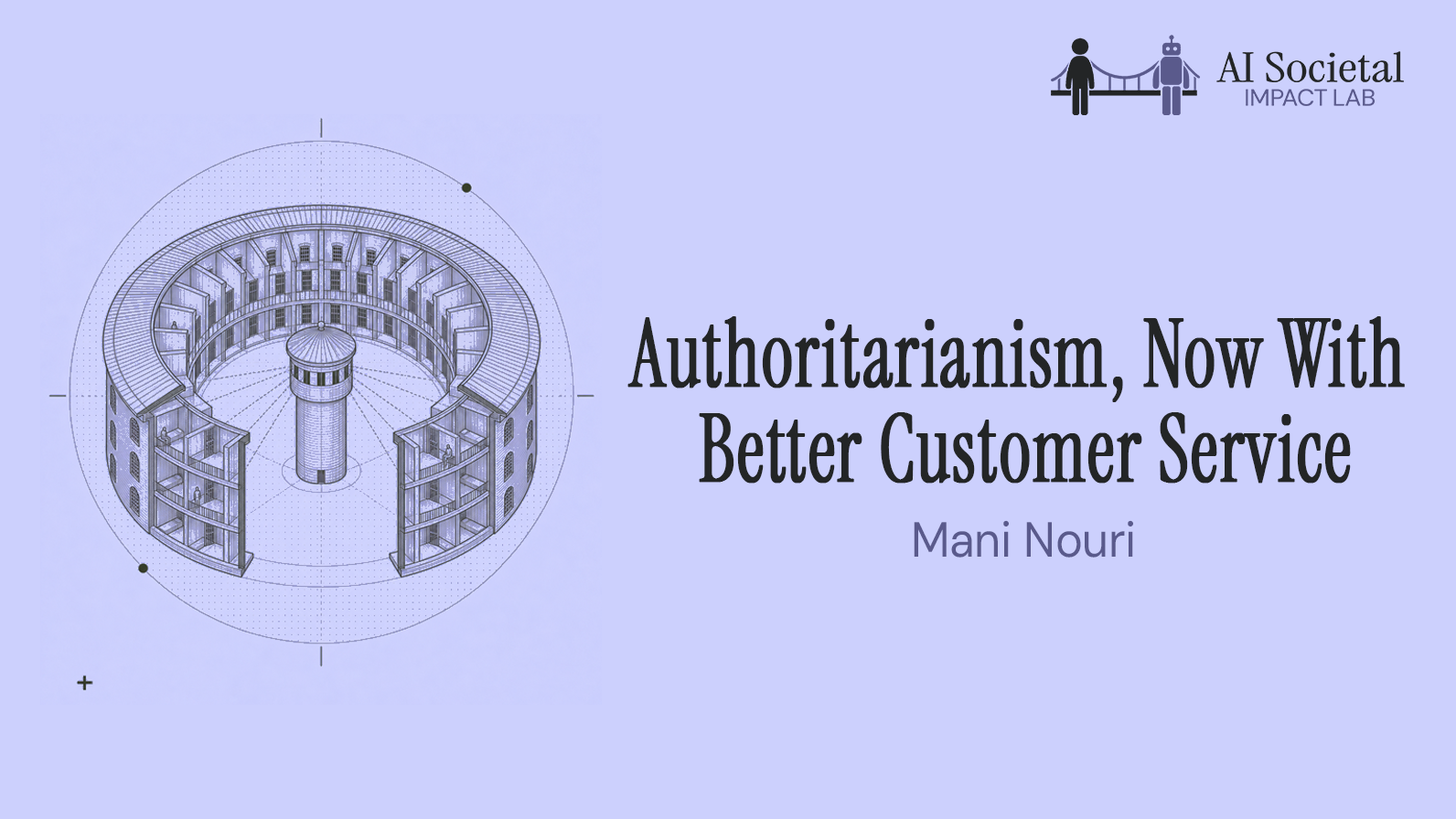
<style>
.page{position:relative;width:1456px;height:819px;background:#ccd0fd}
.page>*{position:absolute;margin:0}
.t1{font:92.9px/95.3px "InstrumentSerif-Regular";letter-spacing:0.005em;color:#232526;font-weight:bold;scale:0.81 1}
.t2{font:49.4px "DMSans9pt-Regular";letter-spacing:-0.005em;color:#5a5a8c;scale:0.93 1}
</style>
<div class="page">
<p class="t1" style="left:627px;top:316px;width:777px;height:168px;text-align:center">Authoritarianism, Now With <br>Better Customer Service</p>
<p class="t2" style="left:913px;top:520px;width:220px;height:38px">Mani Nouri</p>
</div>
